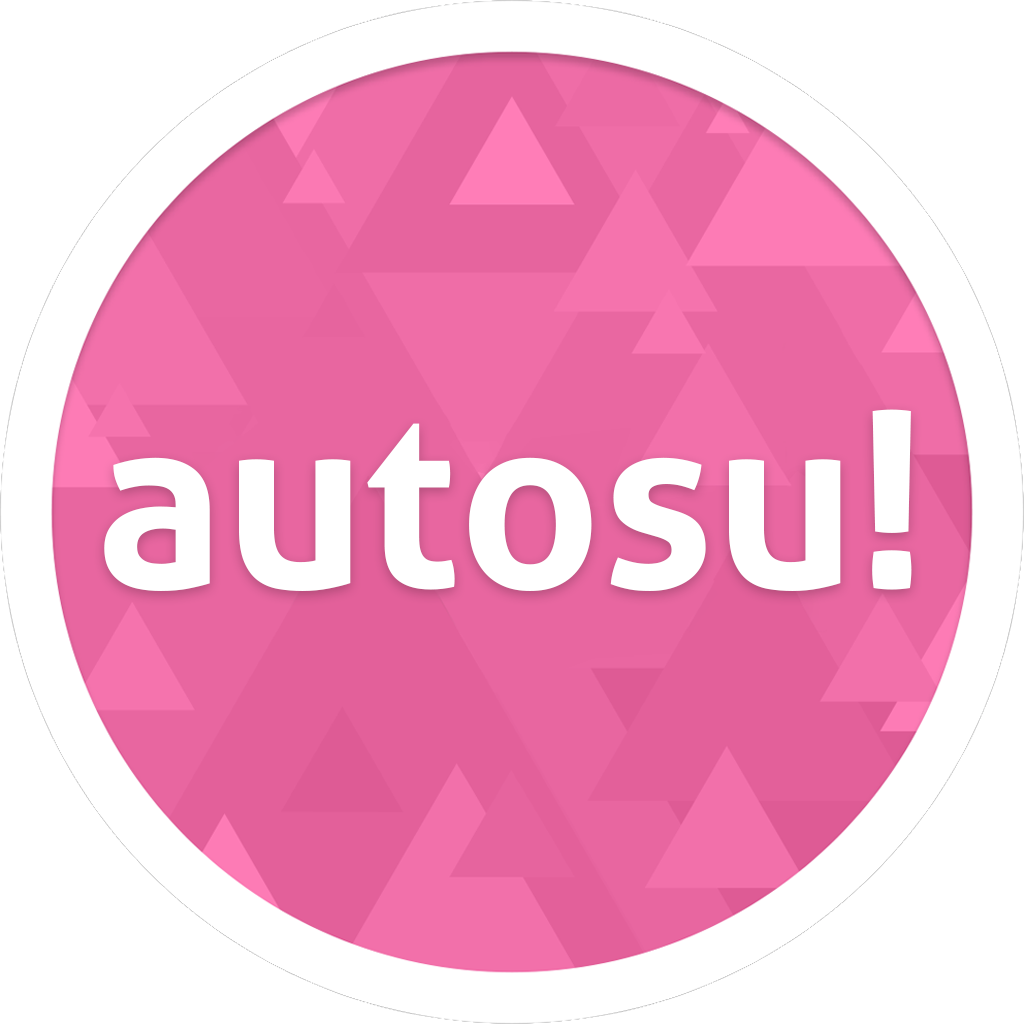
<style>
.page{position:relative;width:1024px;height:1024px;background:#ffffff}
.page>*{position:absolute;margin:0}
.t1{font:246px "Aller-Bold";color:#ffffff}
</style>
<div class="page">
<p class="t1" style="left:104px;top:409px;width:808px;height:182px">autosu!</p>
</div>
